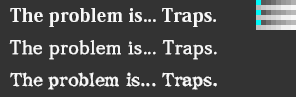
<style>
.page{position:relative;width:296px;height:97px;background:#333333}
.page>*{position:absolute;margin:0}
.t1{font:18px/32px "AdobeFangsongStd-Regular";letter-spacing:0.025em;color:#f8f8f8;font-weight:bold}
.t2{font:18px/32px "KozMinPro-Heavy";letter-spacing:0.022em;color:#f8f8f8}
.t3{font:18px/32px "ComicMysteryStd-DB";letter-spacing:-0.02em;color:#f8f8f8}
.t4{font:18px/32px "ComicMysteryStd-DB";letter-spacing:-0.015em;color:#f8f8f8}
.t5{font:18px/32px "ComicMysteryStd-DB";letter-spacing:-0.02em;color:#f8f8f8;scale:0.9 1}
</style>
<div class="page">
<p class="t1" style="left:9px;top:8px;width:208px;height:82px"><span class="t2">The p</span><span class="t2">roblem</span><span class="t2"> is... Traps.<br></span>The problem is... Traps.<br><span class="t3">The </span><span class="t4">problem</span><span class="t3"> is</span><span class="t5">...</span><span class="t3"> Traps.</span></p>
</div>
